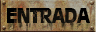
<style>
.page{position:relative;width:96px;height:32px}
.page>*{position:absolute;margin:0}
.t1{font:21px "CartesDisplaySSK";letter-spacing:-0.06em;color:#000000;text-transform:uppercase;scale:0.94 1}
</style>
<div class="page">
<p class="t1" style="left:7px;top:8px;width:83px;height:15px">entrada</p>
</div>
